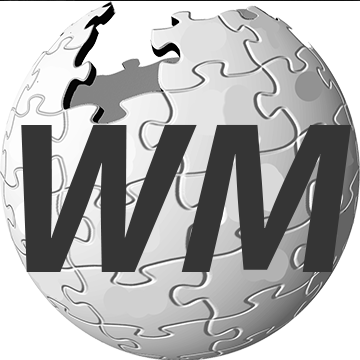
<style>
.page{position:relative;width:360px;height:360px;background:#ffffff}
.page>*{position:absolute;margin:0}
.t1{font:217.7px "MyriadPro-BoldIt";color:#353535;scale:0.96 1}
</style>
<div class="page">
<p class="t1" style="left:21px;top:123px;width:330px;height:148px">WM</p>
</div>
